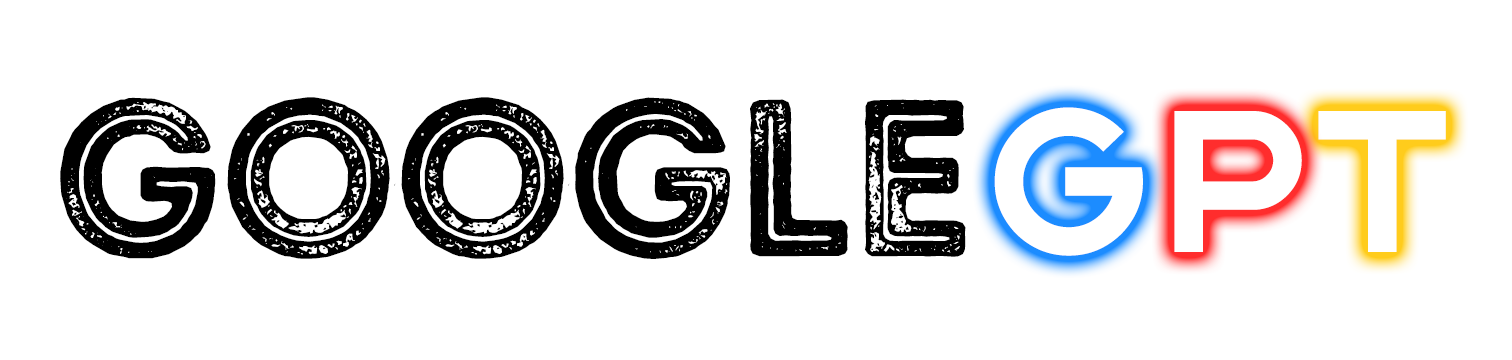
<style>
.page{position:relative;width:1512px;height:360px;background:#ffffff}
.page>*{position:absolute;margin:0}
.t1{font:222.9px "IntroRustG-Base2Line";letter-spacing:-0.02em;color:#000000}
.t2{font:201.2px "Aware-Bold";letter-spacing:-0.02em;color:#ffffff}
</style>
<div class="page">
<p class="t1" style="left:60px;top:97px;width:906px;height:162px">Google</p>
<p class="t1" style="left:60px;top:97px;width:906px;height:162px">Google</p>
<p class="t2" style="left:994px;top:107px;width:149px;height:149px">G</p>
<p class="t2" style="left:994px;top:107px;width:149px;height:149px">G</p>
<p class="t2" style="left:994px;top:107px;width:149px;height:149px">G</p>
<p class="t2" style="left:1174px;top:111px;width:128px;height:141px">P</p>
<p class="t2" style="left:1174px;top:111px;width:128px;height:141px">P</p>
<p class="t2" style="left:1174px;top:111px;width:128px;height:141px">P</p>
<p class="t2" style="left:1318px;top:111px;width:128px;height:141px">T</p>
</div>
